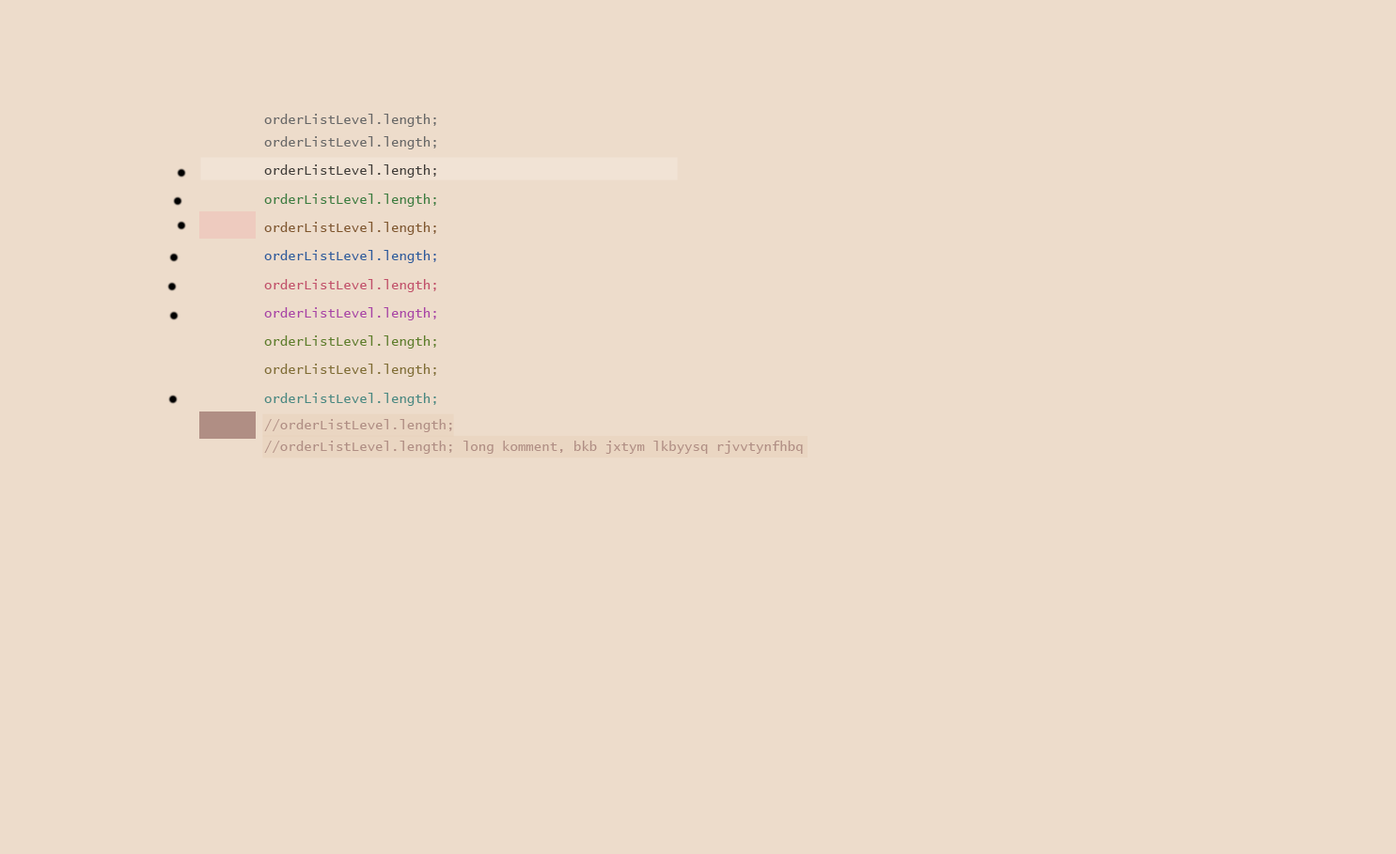
<style>
.page{position:relative;width:1396px;height:854px;background:#eddccb}
.page>*{position:absolute;margin:0}
.t1{font:13.2px "LucidaConsole";color:#676767}
.t2{font:13.2px "LucidaConsole";color:#3f3b37}
.t3{font:13.2px "LucidaConsole";color:#3a7d3f}
.t4{font:13.2px "LucidaConsole";color:#7c5017}
.t5{font:13.2px "LucidaConsole";color:#2b5b9c}
.t6{font:13.2px "LucidaConsole";color:#cc4779}
.t7{font:13.2px "LucidaConsole";color:#a942a6}
.t8{font:13.2px "LucidaConsole";color:#5d7e28}
.t9{font:13.2px "LucidaConsole";color:#7d7121}
.t10{font:13.2px "LucidaConsole";color:#34969a}
.t11{font:13.2px "LucidaConsole";color:#b08e84}
</style>
<div class="page">
<p class="t1" style="left:264px;top:114px;width:172px;height:13px">orderListLevel.length;</p>
<p class="t1" style="left:264px;top:136px;width:172px;height:13px">orderListLevel.length;</p>
<p class="t2" style="left:264px;top:164px;width:172px;height:14px">orderListLevel.length;</p>
<p class="t3" style="left:264px;top:194px;width:172px;height:13px">orderListLevel.length;</p>
<p class="t4" style="left:264px;top:222px;width:172px;height:13px;opacity:0.92">orderListLevel.length;</p>
<p class="t5" style="left:264px;top:250px;width:172px;height:13px">orderListLevel.length;</p>
<p class="t6" style="left:264px;top:279px;width:172px;height:13px;opacity:0.92">orderListLevel.length;</p>
<p class="t7" style="left:264px;top:307px;width:172px;height:13px">orderListLevel.length;</p>
<p class="t8" style="left:264px;top:336px;width:172px;height:13px">orderListLevel.length;</p>
<p class="t9" style="left:264px;top:364px;width:172px;height:13px;opacity:0.92">orderListLevel.length;</p>
<p class="t10" style="left:264px;top:393px;width:172px;height:13px;opacity:0.92">orderListLevel.length;</p>
<p class="t11" style="left:264px;top:419px;width:188px;height:13px">//orderListLevel.length;</p>
<p class="t11" style="left:264px;top:441px;width:539px;height:13px">//orderListLevel.length; long komment, bkb jxtym lkbyysq rjvvtynfhbq</p>
</div>
